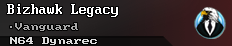
<style>
.page{position:relative;width:232px;height:46px}
.page>*{position:absolute;margin:0}
.t1{font:16px "ModernDOS8x16";color:#ffffff;scale:0.96 1}
.t2{font:16px "ModernDOS8x8";color:#a9a9a9;scale:0.96 1}
.t3{font:16px "ModernDOS8x8";color:#dddddd;scale:0.96 1}
</style>
<div class="page">
<p class="t1" style="left:7px;top:4px;width:111px;height:13px">Bizhawk Legacy</p>
<p class="t2" style="left:10px;top:23px;width:68px;height:8px">•Vanguard</p>
<p class="t3" style="left:10px;top:37px;width:87px;height:8px">N64 Dynarec</p>
</div>
